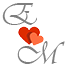
<style>
.page{position:relative;width:67px;height:67px;background:#ffffff}
.page>*{position:absolute;margin:0}
.t1{font:32.7px "Vivaldii";color:#7e7e7e}
</style>
<div class="page">
<p class="t1" style="left:2px;top:3px;width:35px;height:22px">E</p>
<p class="t1" style="left:17px;top:41px;width:48px;height:23px">M</p>
</div>
